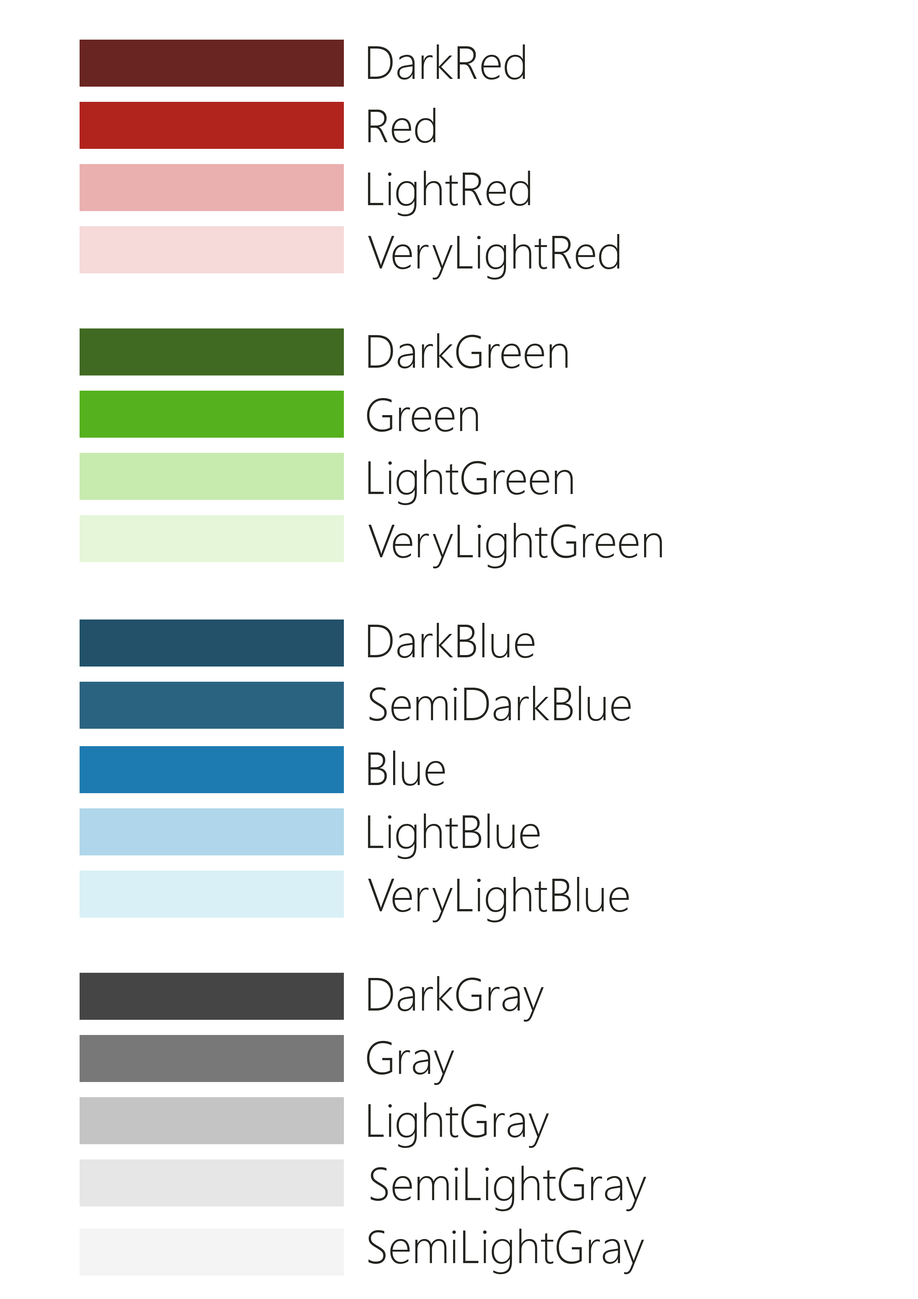
<style>
.page{position:relative;width:918px;height:1299px;background:#ffffff}
.page>*{position:absolute;margin:0}
.t1{font:46.3px "SegoeUI-Light";color:#22241f}
</style>
<div class="page">
<p class="t1" style="left:368px;top:44px;width:157px;height:36px">DarkRed</p>
<p class="t1" style="left:368px;top:108px;width:67px;height:35px">Red</p>
<p class="t1" style="left:368px;top:171px;width:162px;height:45px">LightRed</p>
<p class="t1" style="left:368px;top:234px;width:251px;height:46px">VeryLightRed</p>
<p class="t1" style="left:368px;top:333px;width:200px;height:35px">DarkGreen</p>
<p class="t1" style="left:367px;top:398px;width:111px;height:34px">Green</p>
<p class="t1" style="left:368px;top:459px;width:205px;height:46px">LightGreen</p>
<p class="t1" style="left:368px;top:523px;width:294px;height:45px">VeryLightGreen</p>
<p class="t1" style="left:368px;top:623px;width:167px;height:35px">DarkBlue</p>
<p class="t1" style="left:369px;top:686px;width:262px;height:35px">SemiDarkBlue</p>
<p class="t1" style="left:368px;top:750px;width:77px;height:36px">Blue</p>
<p class="t1" style="left:368px;top:813px;width:172px;height:46px">LightBlue</p>
<p class="t1" style="left:368px;top:877px;width:261px;height:45px">VeryLightBlue</p>
<p class="t1" style="left:368px;top:976px;width:176px;height:45px">DarkGray</p>
<p class="t1" style="left:367px;top:1041px;width:87px;height:44px">Gray</p>
<p class="t1" style="left:368px;top:1102px;width:181px;height:46px">LightGray</p>
<p class="t1" style="left:371px;top:1165px;width:275px;height:46px">SemiLightGray</p>
<p class="t1" style="left:368px;top:1228px;width:276px;height:46px">SemiLightGray</p>
</div>
